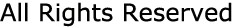
<style>
.page{position:relative;width:234px;height:28px;background:#ffffff}
.page>*{position:absolute;margin:0}
.t1{font:24px "Verdana";color:#030201}
</style>
<div class="page">
<p class="t1" style="left:0px;top:2px;width:232px;height:25px">All Rights Reserved</p>
</div>
